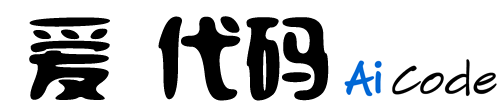
<style>
.page{position:relative;width:500px;height:102px;background:#ffffff}
.page>*{position:absolute;margin:0}
.t1{font:92.8px "SXSLST";letter-spacing:-0.05em;color:#000000;text-transform:uppercase}
</style>
<div class="page">
<p class="t1" style="left:29px;top:16px;width:300px;height:85px">爱 代码</p>
</div>
